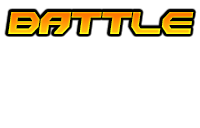
<style>
.page{position:relative;width:200px;height:128px;background:#ffffff}
.page>*{position:absolute;margin:0}
.t1{font:37.5px "Extremist";letter-spacing:-0.45em;font-style:italic;scale:0.8 1}
</style>
<div class="page">
<p class="t1" style="left:8px;top:12px;width:186px;height:22px">BATTLE</p>
</div>
